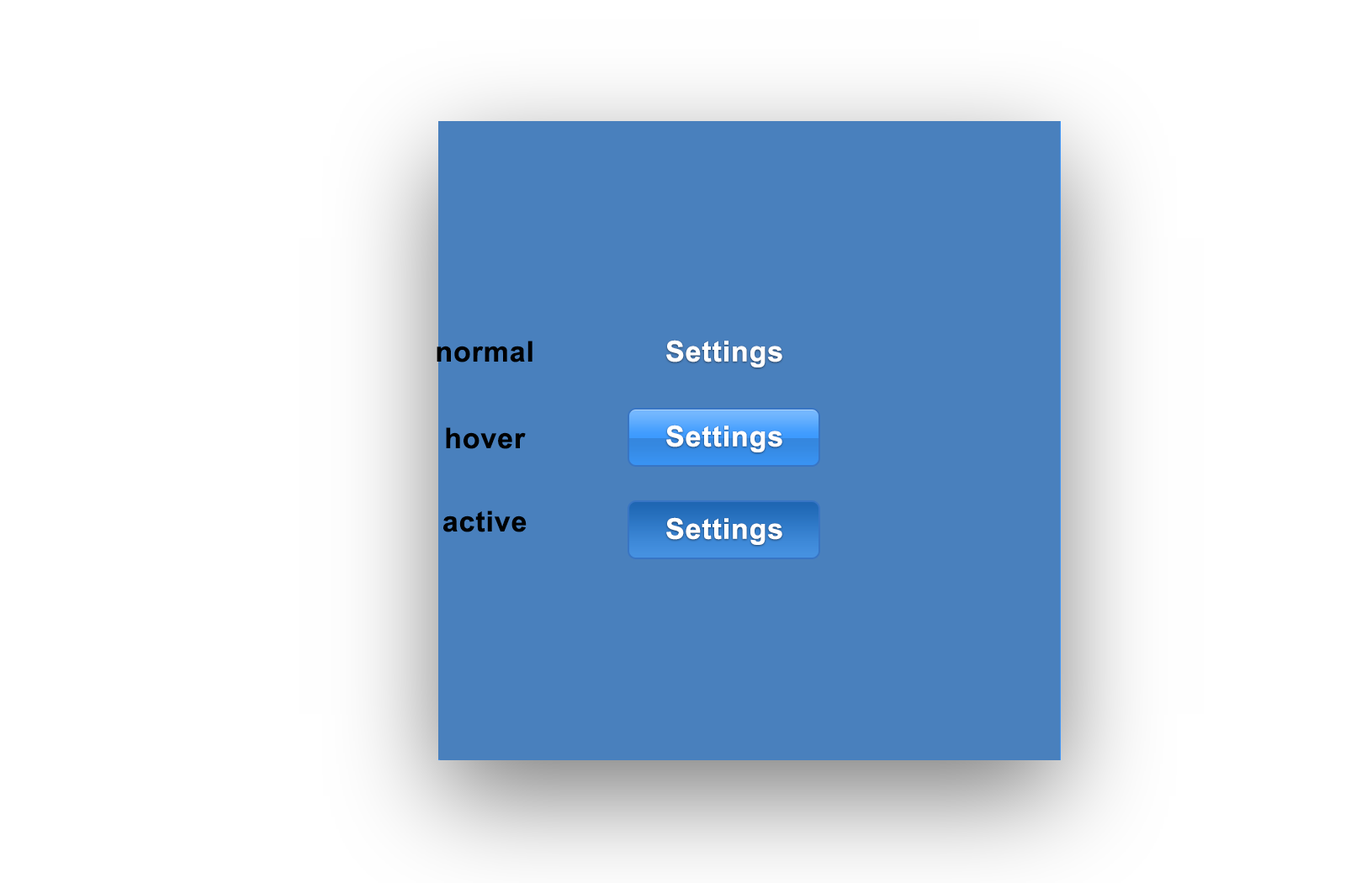
<style>
.page{position:relative;width:1351px;height:883px;background:#ffffff}
.page>*{position:absolute;margin:0}
.t1{font:28.6px "Arial-BoldMT";letter-spacing:0.025em;color:#000000}
.t2{font:28.6px "Arial-BoldMT";letter-spacing:0.025em;color:#ffffff}
</style>
<div class="page">
<p class="t1" style="left:436px;top:341px;width:96px;height:21px">normal</p>
<p class="t2" style="left:666px;top:340px;width:116px;height:27px">Settings</p>
<p class="t2" style="left:666px;top:425px;width:116px;height:27px">Settings</p>
<p class="t1" style="left:446px;top:427px;width:80px;height:22px">hover</p>
<p class="t1" style="left:443px;top:510px;width:83px;height:22px">active</p>
<p class="t2" style="left:666px;top:517px;width:116px;height:28px">Settings</p>
</div>
